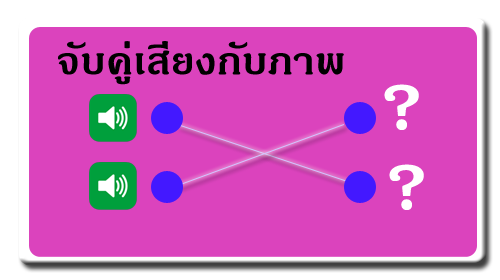
<style>
.page{position:relative;width:500px;height:280px;background:#db43bd}
.page>*{position:absolute;margin:0}
.t1{font:53.1px "JasmineUPCBold";color:#000000}
.t2{font:104.9px "JasmineUPCBold";color:#ffffff}
</style>
<div class="page">
<p class="t1" style="left:58px;top:41px;width:286px;height:44px">จับคู่เสียงกับภาพ</p>
<p class="t2" style="left:384px;top:84px;width:35px;height:46px">?</p>
<p class="t2" style="left:389px;top:164px;width:35px;height:46px">?</p>
</div>
